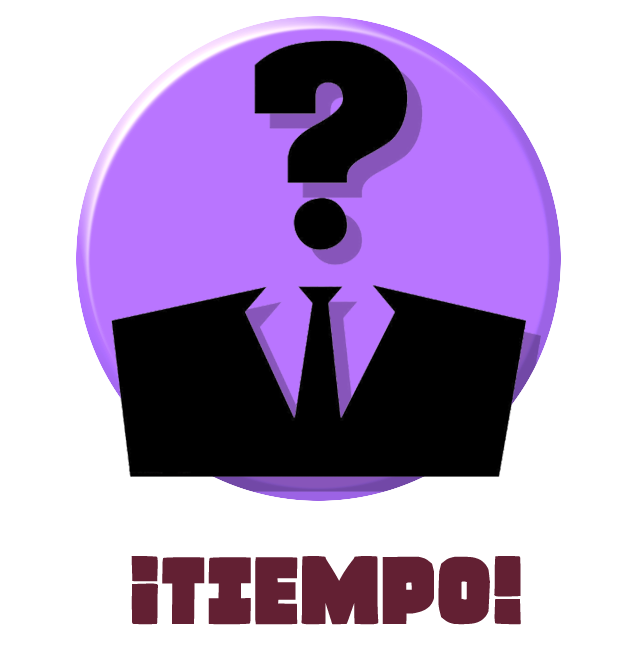
<style>
.page{position:relative;width:638px;height:671px;background:#ffffff}
.page>*{position:absolute;margin:0}
.t1{font:104.2px "FrostGiant";letter-spacing:0.02em;color:#632033}
</style>
<div class="page">
<p class="t1" style="left:131px;top:556px;width:390px;height:69px">¡TIEMPO!</p>
</div>
